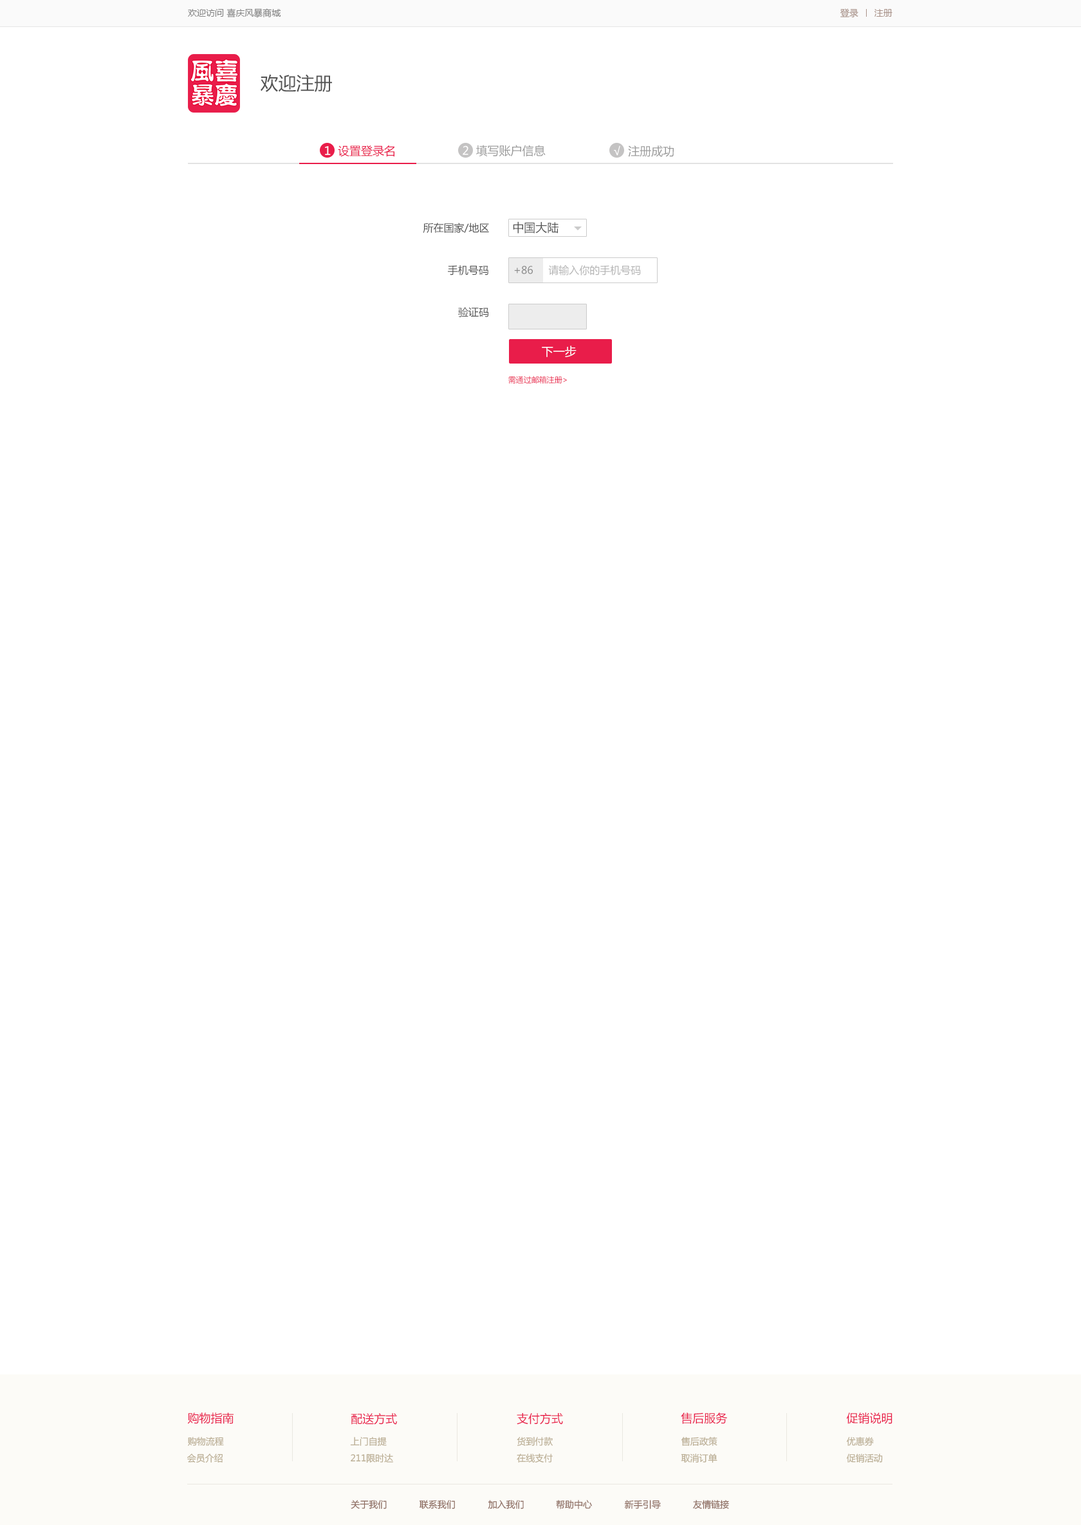
<style>
.page{position:relative;width:1081px;height:1525px;background:#ffffff}
.page>*{position:absolute;margin:0}
.t1{font:9px "MicrosoftYaHei";color:#848484}
.t2{font:9px "MicrosoftYaHei";color:#a99289}
.t3{font:18px "MicrosoftYaHei";color:#545454}
.t4{font:11.6px "MicrosoftYaHei";color:#e91d4a}
.t5{font:11.6px "MicrosoftYaHei";color:#ffffff}
.t6{font:11.6px "MicrosoftYaHei";color:#999999}
.t7{font:11.6px "MicrosoftYaHei";color:#545454}
.t8{font:10.3px "MicrosoftYaHei";color:#545454}
.t9{font:10.3px "MicrosoftYaHei";color:#b5b5b5}
.t10{font:10.3px "MicrosoftYaHei";color:#8b8b8b}
.t11{font:7.7px "MicrosoftYaHei";color:#e91d4a}
.t12{font:9px "MicrosoftYaHei";color:#baad93}
.t13{font:9px "MicrosoftYaHei";color:#8c6a5e}
</style>
<div class="page">
<p class="t1" style="left:188px;top:8px;width:93px;height:9px">欢迎访问 喜庆风暴商城</p>
<p class="t2" style="left:840px;top:8px;width:52px;height:9px">登录      注册</p>
<p class="t3" style="left:261px;top:74px;width:71px;height:18px">欢迎注册</p>
<p class="t4" style="left:325px;top:145px;width:69px;height:12px"><span class="t5">1  </span>设置登录名</p>
<p class="t6" style="left:463px;top:145px;width:83px;height:11px"><span class="t5">2  </span>填写账户信息</p>
<p class="t6" style="left:614px;top:145px;width:60px;height:12px"><span class="t5">√  </span>注册成功</p>
<p class="t7" style="left:513px;top:221px;width:45px;height:13px">中国大陆</p>
<p class="t8" style="left:423px;top:223px;width:66px;height:10px">所在国家/地区</p>
<p class="t8" style="left:448px;top:265px;width:40px;height:10px">手机号码</p>
<p class="t9" style="left:514px;top:265px;width:127px;height:10px"><span class="t10">+86     </span>请输入你的手机号码</p>
<p class="t8" style="left:458px;top:307px;width:31px;height:10px">验证码</p>
<p class="t5" style="left:542px;top:346px;width:34px;height:11px">下一步</p>
<p class="t11" style="left:508px;top:376px;width:59px;height:7px">需通过邮箱注册&gt;</p>
<p class="t4" style="left:187px;top:1412px;width:47px;height:12px">购物指南</p>
<p class="t4" style="left:351px;top:1413px;width:46px;height:11px">配送方式</p>
<p class="t4" style="left:517px;top:1413px;width:46px;height:11px">支付方式</p>
<p class="t4" style="left:681px;top:1412px;width:46px;height:12px">售后服务</p>
<p class="t4" style="left:846px;top:1412px;width:46px;height:12px">促销说明</p>
<p class="t12" style="left:188px;top:1437px;width:36px;height:9px">购物流程</p>
<p class="t12" style="left:350px;top:1437px;width:37px;height:9px">上门自提</p>
<p class="t12" style="left:517px;top:1437px;width:36px;height:9px">货到付款</p>
<p class="t12" style="left:681px;top:1437px;width:36px;height:9px">售后政策</p>
<p class="t12" style="left:846px;top:1437px;width:28px;height:9px">优惠券</p>
<p class="t12" style="left:187px;top:1453px;width:36px;height:10px">会员介绍</p>
<p class="t12" style="left:351px;top:1453px;width:43px;height:10px">211限时达</p>
<p class="t12" style="left:517px;top:1453px;width:36px;height:9px">在线支付</p>
<p class="t12" style="left:681px;top:1453px;width:36px;height:10px">取消订单</p>
<p class="t12" style="left:846px;top:1453px;width:37px;height:9px">促销活动</p>
<p class="t13" style="left:351px;top:1500px;width:36px;height:9px">关于我们</p>
<p class="t13" style="left:419px;top:1500px;width:36px;height:9px">联系我们</p>
<p class="t13" style="left:488px;top:1500px;width:36px;height:9px">加入我们</p>
<p class="t13" style="left:556px;top:1500px;width:36px;height:9px">帮助中心</p>
<p class="t13" style="left:624px;top:1500px;width:37px;height:9px">新手引导</p>
<p class="t13" style="left:693px;top:1500px;width:36px;height:9px">友情链接</p>
</div>
